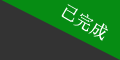
<style>
.page{position:relative;width:120px;height:60px;background:#333333}
.page>*{position:absolute;margin:0}
.t1{font:18px "SimSun";color:#ffffff;scale:0.95 1}
</style>
<div class="page">
<p class="t1" style="left:61px;top:4px;width:47px;height:37px;rotate:30deg">已完成</p>
</div>
